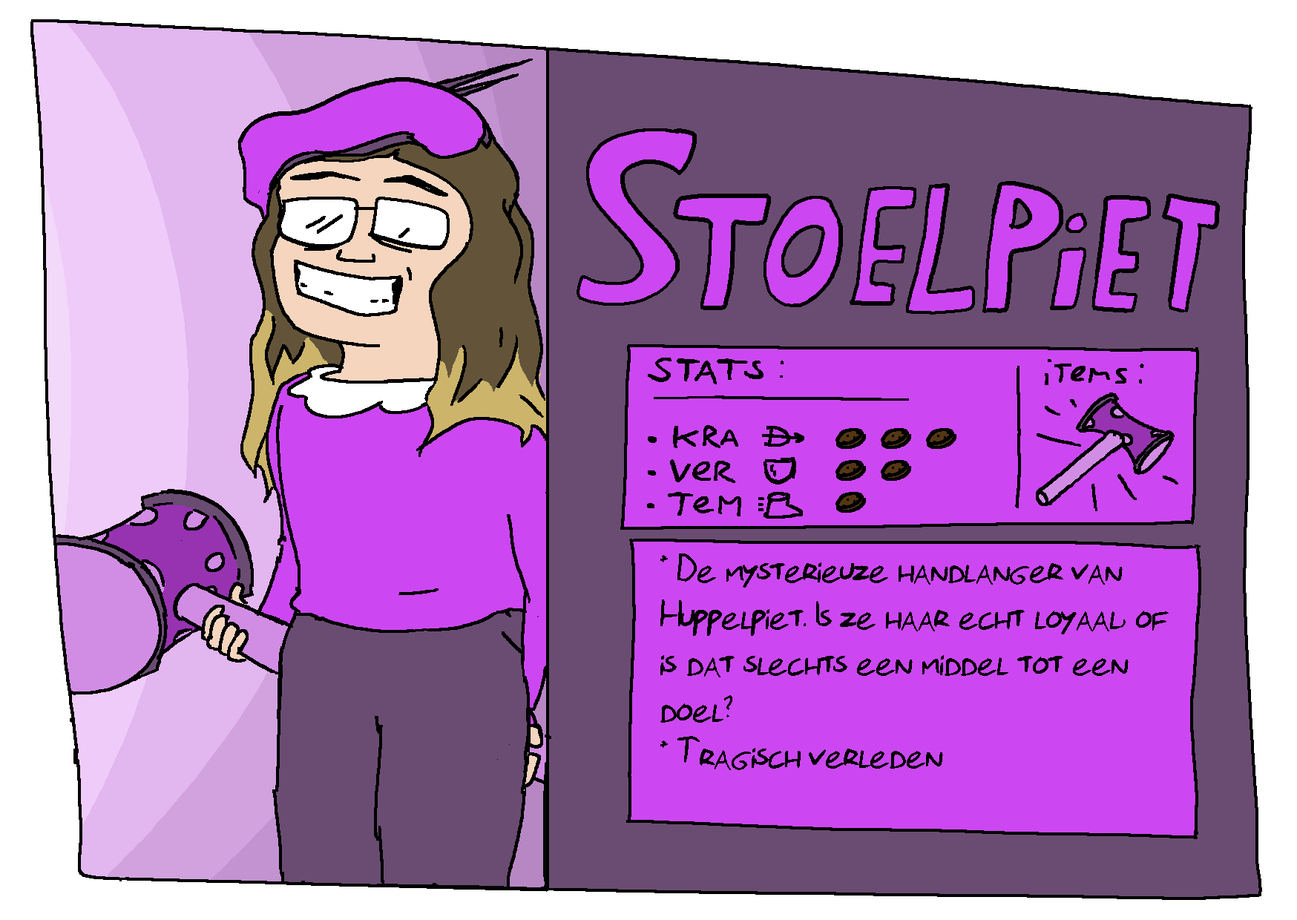
<style>
.page{position:relative;width:1297px;height:920px;background:#6a4c72}
.page>*{position:absolute;margin:0}
.t1{font:40.2px/46.4px "Florisfont2-Regular";color:#000000}
</style>
<div class="page">
<p class="t1" style="left:660px;top:553px;width:508px;height:217px">* De mysterieuze handlanger van <br>Huppelpiet. Is ze haar echt loyaal, of <br>is dat slechts een middel tot een <br>doel?<br>* Tragisch verleden</p>
</div>
